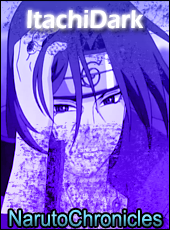
<style>
.page{position:relative;width:170px;height:230px}
.page>*{position:absolute;margin:0}
.t1{font:26.4px "ErasITC-Demi";color:#ffffff;scale:0.91 1}
.t2{font:22px "ArialMT";scale:0.91 1}
</style>
<div class="page">
<p class="t1" style="left:27px;top:10px;width:117px;height:19px">ItachiDark</p>
<p class="t2" style="left:9px;top:209px;width:153px;height:18px">NarutoChronicles</p>
</div>
